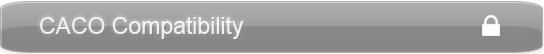
<style>
.page{position:relative;width:544px;height:54px}
.page>*{position:absolute;margin:0}
.t1{font:23px "ArialMT";color:#ffffff}
</style>
<div class="page">
<p class="t1" style="left:40px;top:17px;width:204px;height:22px">CACO Compatibility</p>
</div>
